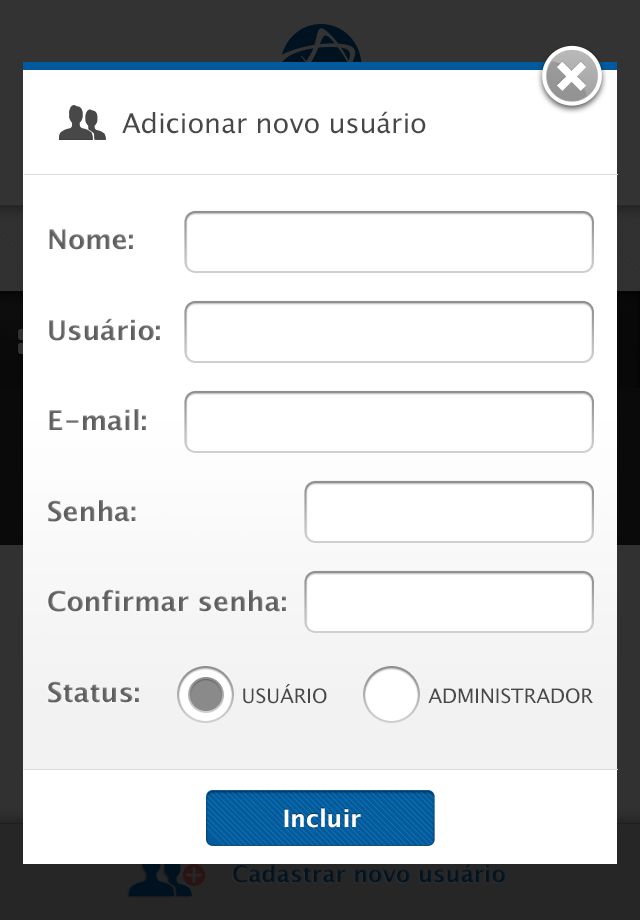
<style>
.page{position:relative;width:640px;height:920px;background:#ffffff}
.page>*{position:absolute;margin:0}
.t1{font:27.2px "LucidaGrande";color:#484848}
.t2{font:27.2px/45.3px "LucidaGrande-Bold";color:#5d5d5d}
.t3{font:19.9px "LucidaGrande";color:#484848}
.t4{font:24px "LucidaGrande-Bold";color:#ffffff}
</style>
<div class="page">
<p class="t1" style="left:122px;top:111px;width:304px;height:23px">Adicionar novo usuário</p>
<p class="t2" style="left:48px;top:229px;width:238px;height:474px">Nome:<br><br>Usuário:<br><br>E-mail:<br><br>Senha:<br><br>Confirmar senha:<br><br>Status:</p>
<p class="t3" style="left:243px;top:684px;width:350px;height:20px">USUÁRIO                ADMINISTRADOR</p>
<p class="t4" style="left:284px;top:808px;width:77px;height:20px">Incluir</p>
</div>
